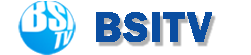
<style>
.page{position:relative;width:251px;height:55px;background:#ffffff}
.page>*{position:absolute;margin:0}
.t1{font:43.1px "FranklinGothic-Demi";color:#0a4ea1;font-weight:bold}
</style>
<div class="page">
<p class="t1" style="left:96px;top:12px;width:116px;height:30px">BSITV</p>
</div>
